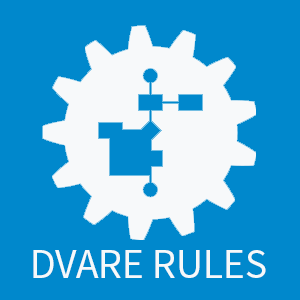
<style>
.page{position:relative;width:300px;height:300px;background:#0088cc}
.page>*{position:absolute;margin:0}
.t1{font:41.7px "SourceSansPro-Regular";color:#f6f9fa}
</style>
<div class="page">
<p class="t1" style="left:33px;top:250px;width:233px;height:28px">DVARE RULES</p>
</div>
